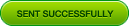
<style>
.page{position:relative;width:129px;height:27px}
.page>*{position:absolute;margin:0}
.t1{font:9px "HelveticaNeue-Medium";color:#004400}
</style>
<div class="page">
<p class="t1" style="left:17px;top:10px;width:97px;height:8px">SENT SUCCESSFULLY</p>
</div>
